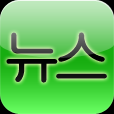
<style>
.page{position:relative;width:114px;height:114px}
.page>*{position:absolute;margin:0}
.t1{font:60px "GulimChe";letter-spacing:-0.2em;font-weight:bold}
</style>
<div class="page">
<p class="t1" style="left:6px;top:32px;width:101px;height:51px">뉴스</p>
</div>
